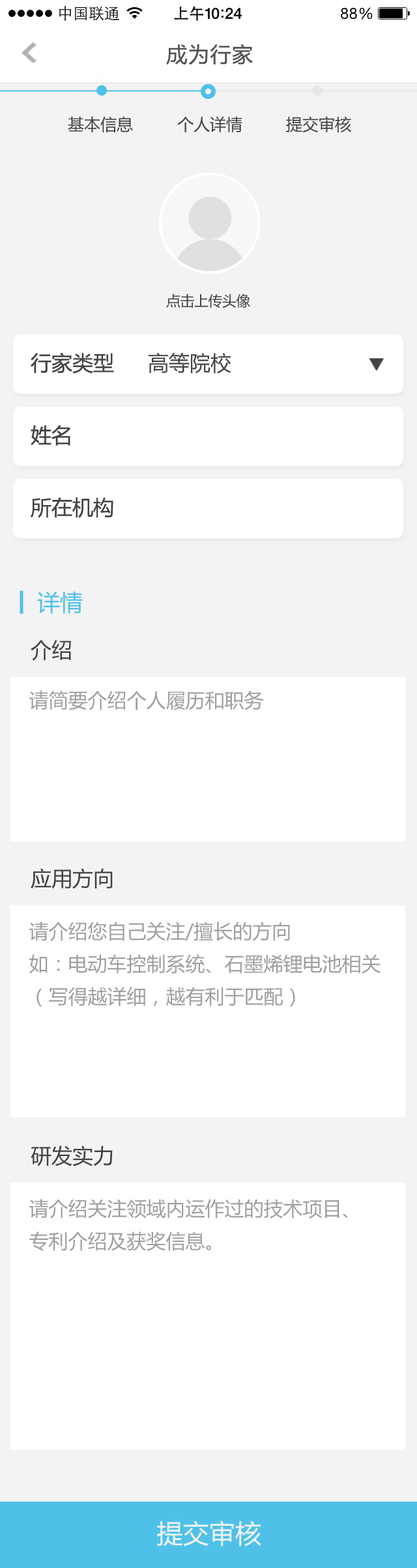
<style>
.page{position:relative;width:417px;height:1568px;background:#ffffff}
.page>*{position:absolute;margin:0}
.t1{font:20.8px "MicrosoftYaHei";letter-spacing:0.05em;color:#535353}
.t2{font:16.3px "MicrosoftYaHei";color:#434343}
.t3{font:14.3px "MicrosoftYaHei";letter-spacing:-0.025em;color:#434343}
.t4{font:20.8px "MicrosoftYaHei";color:#434343}
.t5{font:22.8px "MicrosoftYaHei";color:#4fc1e9}
.t6{font:19.5px "MicrosoftYaHei";color:#a0a0a0}
.t7{font:19.5px/32.5px "MicrosoftYaHei";color:#a0a0a0}
.t8{font:26px "MicrosoftYaHei";color:#f4f4f4}
</style>
<div class="page">
<p class="t1" style="left:166px;top:44px;width:87px;height:21px">成为行家</p>
<p class="t2" style="left:68px;top:117px;width:65px;height:16px">基本信息</p>
<p class="t2" style="left:177px;top:117px;width:65px;height:16px">个人详情</p>
<p class="t2" style="left:286px;top:116px;width:65px;height:17px">提交审核</p>
<p class="t3" style="left:166px;top:294px;width:84px;height:14px">点击上传头像</p>
<p class="t4" style="left:31px;top:352px;width:83px;height:22px">行家类型</p>
<p class="t4" style="left:148px;top:353px;width:83px;height:21px">高等院校</p>
<p class="t4" style="left:31px;top:425px;width:39px;height:21px">姓名</p>
<p class="t4" style="left:31px;top:497px;width:82px;height:21px">所在机构</p>
<p class="t5" style="left:37px;top:591px;width:46px;height:23px">详情</p>
<p class="t4" style="left:31px;top:640px;width:40px;height:21px">介绍</p>
<p class="t6" style="left:29px;top:691px;width:235px;height:19px">请简要介绍个人履历和职务</p>
<p class="t4" style="left:31px;top:868px;width:82px;height:21px">应用方向</p>
<p class="t7" style="left:29px;top:922px;width:351px;height:85px">请介绍您自己关注/擅长的方向<br>如：电动车控制系统、石墨烯锂电池相关<br>（写得越详细，越有利于匹配）</p>
<p class="t4" style="left:31px;top:1146px;width:82px;height:20px">研发实力</p>
<p class="t7" style="left:29px;top:1199px;width:319px;height:52px">请介绍关注领域内运作过的技术项目、<br>专利介绍及获奖信息。</p>
<p class="t8" style="left:157px;top:1520px;width:104px;height:27px">提交审核</p>
</div>
